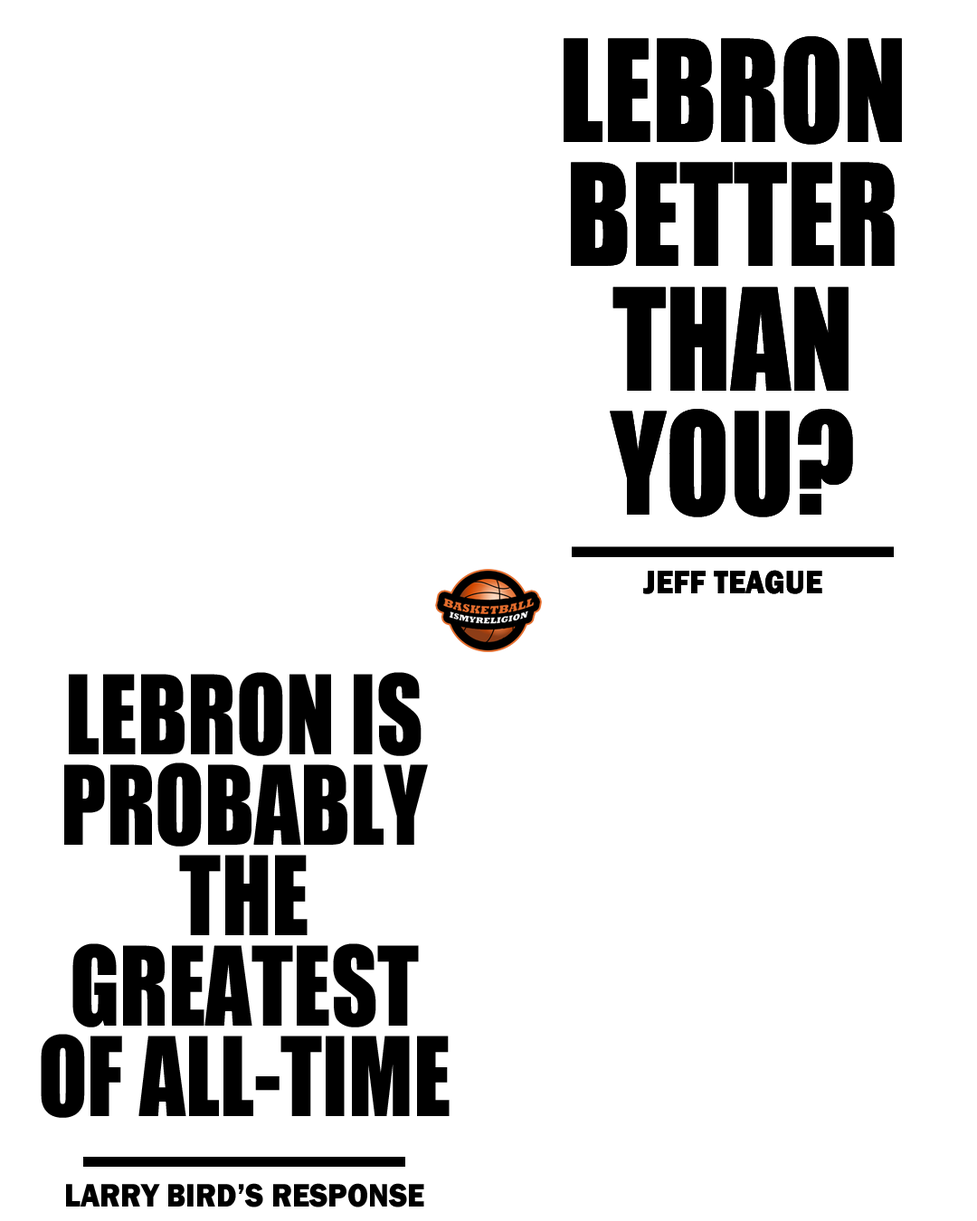
<style>
.page{position:relative;width:977px;height:1221px;background:#ffffff}
.page>*{position:absolute;margin:0}
.t1{font:130.8px/124.3px "Impact";color:#000000;scale:0.89 1}
.t2{font:33.8px "FranklinGothic-Heavy";color:#000000;scale:0.89 1}
.t3{font:101.3px/90.4px "Impact";color:#000000;scale:0.89 1}
</style>
<div class="page">
<p class="t1" style="left:563px;top:36px;width:339px;height:481px;text-align:center">LEBRON BETTER THAN YOU?</p>
<p class="t1" style="left:563px;top:36px;width:339px;height:481px;text-align:center">LEBRON BETTER THAN YOU?</p>
<p class="t2" style="left:643px;top:570px;width:179px;height:24px">JEFF TEAGUE</p>
<p class="t2" style="left:643px;top:570px;width:179px;height:24px">JEFF TEAGUE</p>
<p class="t3" style="left:41px;top:672px;width:408px;height:446px;text-align:center">LEBRON IS PROBABLY THE GREATEST OF ALL-TIME</p>
<p class="t2" style="left:66px;top:1183px;width:358px;height:24px">LARRY BIRD’S RESPONSE</p>
</div>
